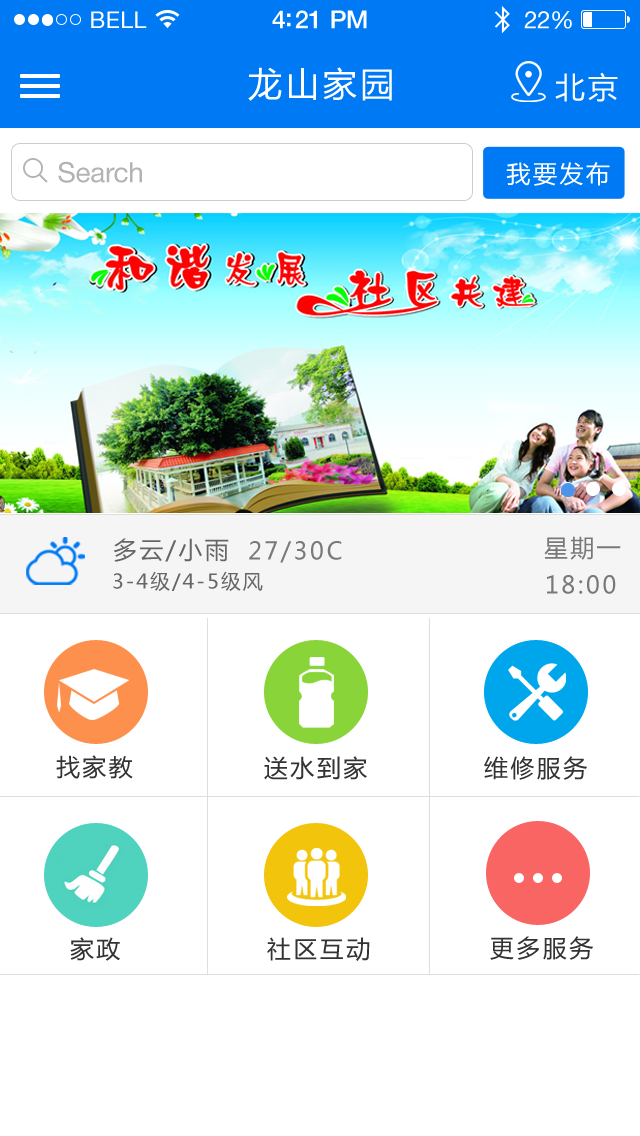
<style>
.page{position:relative;width:640px;height:1136px;background:#ffffff}
.page>*{position:absolute;margin:0}
.t1{font:23px "HelveticaNeue";letter-spacing:0.02em;color:#ffffff}
.t2{font:25px "HelveticaNeue-Medium";letter-spacing:-0.02em;color:#ffffff}
.t3{font:24px "HelveticaNeue";letter-spacing:-0.02em;color:#ffffff}
.t4{font:34px "MicrosoftYaHei";letter-spacing:0.1em;color:#ffffff}
.t5{font:30px "MicrosoftYaHei";letter-spacing:0.1em;color:#ffffff}
.t6{font:28px "HelveticaNeue";letter-spacing:-0.01em;color:#b3b3b3}
.t7{font:24px "MicrosoftYaHei";letter-spacing:0.1em;color:#ffffff}
.t8{font:24px "MicrosoftYaHei";letter-spacing:0.1em;color:#666666}
.t9{font:24px "MicrosoftYaHei";letter-spacing:0.1em;color:#797979}
.t10{font:20px "MicrosoftYaHei";letter-spacing:0.1em;color:#797979}
.t11{font:20px "MicrosoftYaHei";letter-spacing:0.1em;color:#666666}
.t12{font:24px "MicrosoftYaHei";letter-spacing:0.1em;color:#333333}
</style>
<div class="page">
<p class="t1" style="left:91px;top:11px;width:56px;height:17px">BELL</p>
<p class="t2" style="left:272px;top:10px;width:95px;height:19px">4:21 PM</p>
<p class="t3" style="left:524px;top:11px;width:48px;height:18px">22%</p>
<p class="t4" style="left:248px;top:67px;width:144px;height:34px">龙山家园</p>
<p class="t5" style="left:555px;top:72px;width:63px;height:30px">北京</p>
<p class="t6" style="left:58px;top:161px;width:84px;height:22px">Search</p>
<p class="t7" style="left:506px;top:162px;width:104px;height:24px">我要发布</p>
<p class="t8" style="left:113px;top:538px;width:116px;height:24px">多云/小雨</p>
<p class="t9" style="left:249px;top:541px;width:93px;height:22px">27/30C</p>
<p class="t9" style="left:544px;top:536px;width:77px;height:24px"><span class="t10"> </span>星期一</p>
<p class="t11" style="left:113px;top:571px;width:150px;height:20px">3-4级/4-5级风</p>
<p class="t9" style="left:547px;top:575px;width:69px;height:19px">18:00</p>
<p class="t12" style="left:56px;top:755px;width:77px;height:24px">找家教</p>
<p class="t12" style="left:264px;top:756px;width:103px;height:24px">送水到家</p>
<p class="t12" style="left:484px;top:756px;width:104px;height:24px">维修服务</p>
<p class="t12" style="left:70px;top:937px;width:50px;height:24px">家政</p>
<p class="t12" style="left:267px;top:937px;width:103px;height:24px">社区互动</p>
<p class="t12" style="left:490px;top:936px;width:104px;height:24px">更多服务</p>
</div>
